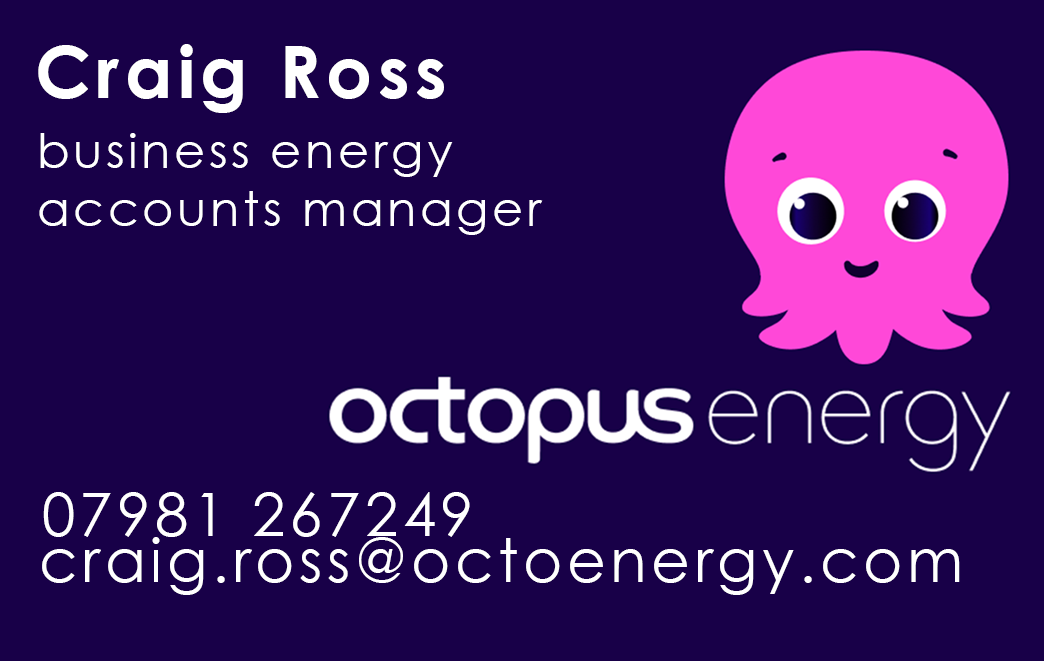
<style>
.page{position:relative;width:1044px;height:661px;background:#180048}
.page>*{position:absolute;margin:0}
.t1{font:72px "CenturyGothic-Bold";letter-spacing:0.075em;color:#ffffff}
.t2{font:48px "CenturyGothic";letter-spacing:0.075em;color:#ffffff}
.t3{font:60px "CenturyGothic";letter-spacing:0.075em;color:#ffffff;text-transform:uppercase}
.t4{font:60px "CenturyGothic";letter-spacing:0.075em;color:#ffffff}
</style>
<div class="page">
<p class="t1" style="left:38px;top:44px;width:406px;height:69px">Craig Ross</p>
<p class="t2" style="left:39px;top:133px;width:504px;height:102px">business energy<br>accounts manager</p>
<p class="t3" style="left:43px;top:492px;width:427px;height:45px">07981 267249</p>
<p class="t4" style="left:42px;top:537px;width:918px;height:58px">craig.ross@octoenergy.com</p>
</div>
